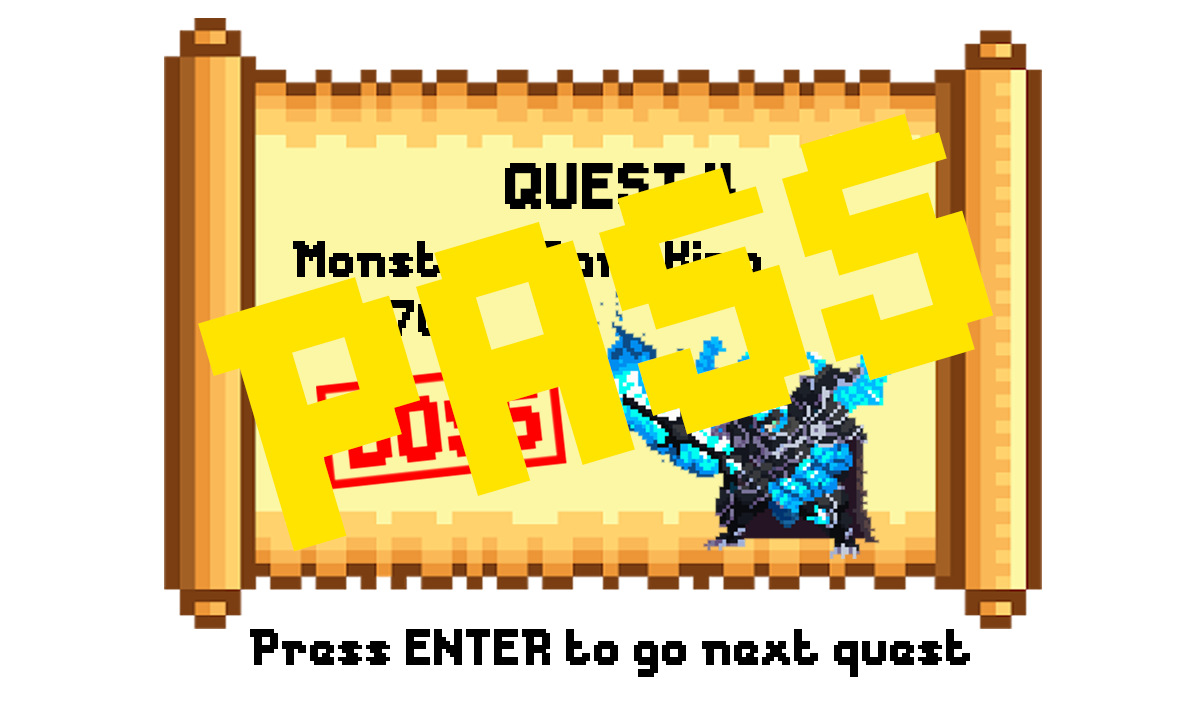
<style>
.page{position:relative;width:1200px;height:720px;background:#ffffff}
.page>*{position:absolute;margin:0}
.t1{font:327.3px "Messe-Duesseldorf";color:#ffe400}
.t2{font:61.3px "Messe-Duesseldorf";color:#000000}
.t3{font:48px "Messe-Duesseldorf"}
.t4{font:48px "Messe-Duesseldorf";color:#ffe400}
.t5{font:48px "Messe-Duesseldorf";color:#000000}
</style>
<div class="page">
<p class="t1" style="left:198px;top:113px;width:796px;height:439px;rotate:-17deg">PASS</p>
<p class="t2" style="left:505px;top:163px;width:231px;height:46px">QUEST 4</p>
<p class="t3" style="left:293px;top:241px;width:468px;height:48px">Monster : Dark King</p>
<p class="t4" style="left:294px;top:300px;width:148px;height:36px">HP : 70</p>
<p class="t5" style="left:250px;top:629px;width:720px;height:48px">Press ENTER to go next quest</p>
</div>
